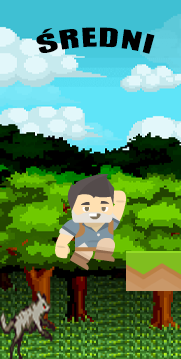
<style>
.page{position:relative;width:181px;height:359px}
.page>*{position:absolute;margin:0}
.t1{font:24px "Impact";color:#000000}
</style>
<div class="page">
<p class="t1" style="left:36px;top:27px;width:119px;height:27px">ŚREDNI</p>
</div>
